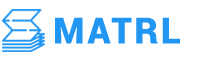
<style>
.page{position:relative;width:200px;height:60px;background:#ffffff}
.page>*{position:absolute;margin:0}
.t1{font:36px "Roboto-Black";letter-spacing:0.075em;color:#2196f3}
</style>
<div class="page">
<p class="t1" style="left:55px;top:17px;width:125px;height:27px">MATRL</p>
</div>
